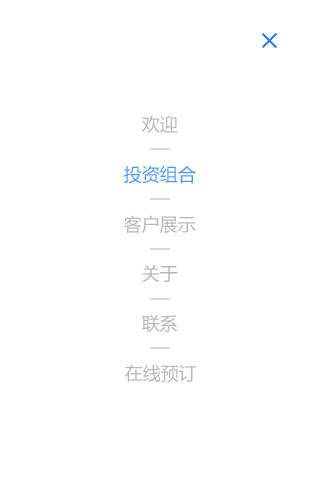
<style>
.page{position:relative;width:320px;height:480px;background:#ffffff}
.page>*{position:absolute;margin:0}
.t1{font:18px "MicrosoftYaHei";color:#b8b5b5}
.t2{font:18px "MicrosoftYaHei";color:#4595f7}
</style>
<div class="page">
<p class="t1" style="left:142px;top:115px;width:36px;height:18px">欢迎</p>
<p class="t2" style="left:124px;top:165px;width:72px;height:19px">投资组合</p>
<p class="t1" style="left:124px;top:215px;width:72px;height:19px">客户展示</p>
<p class="t1" style="left:142px;top:265px;width:36px;height:18px">关于</p>
<p class="t1" style="left:142px;top:314px;width:36px;height:18px">联系</p>
<p class="t1" style="left:125px;top:364px;width:72px;height:19px">在线预订</p>
</div>
